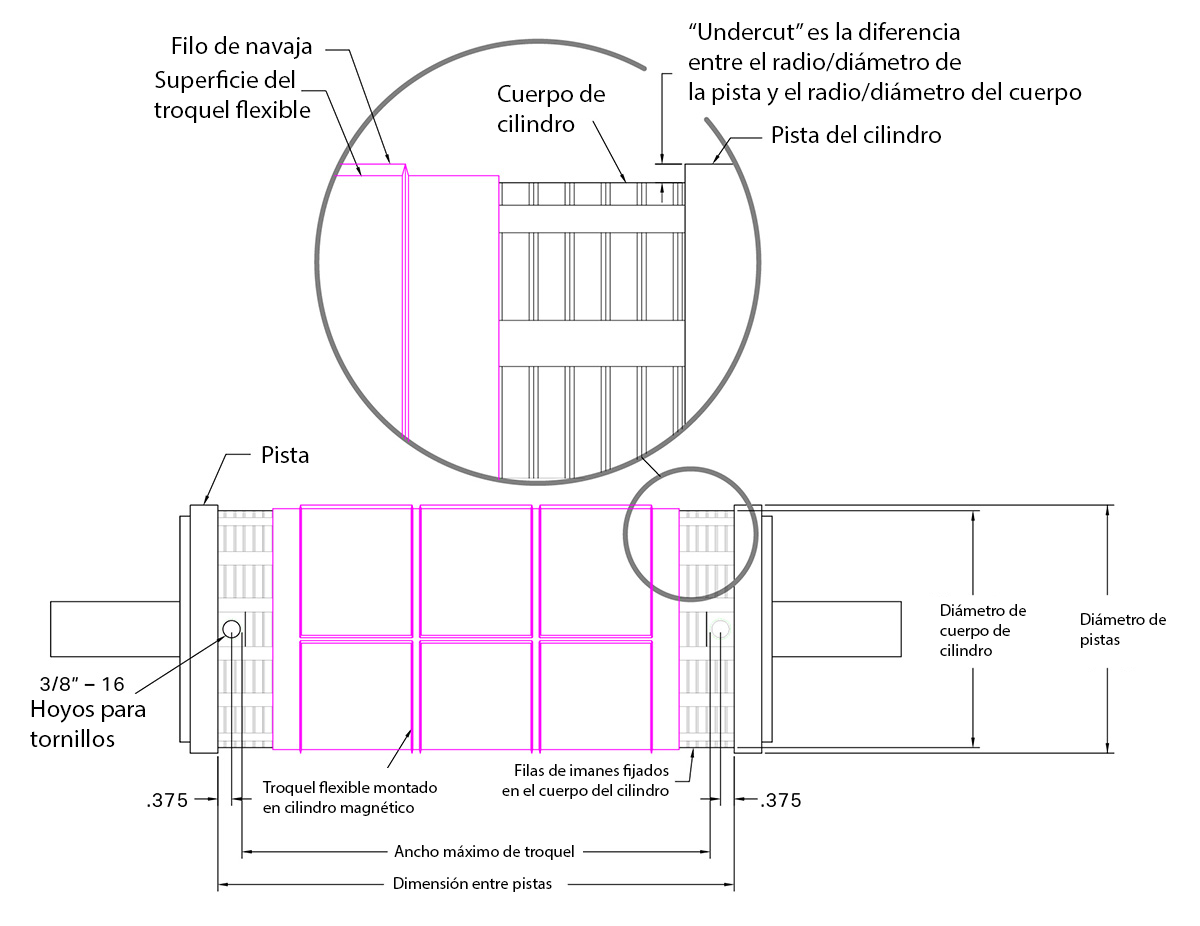
<style>
.page{position:relative;width:1200px;height:926px;background:#ffffff}
.page>*{position:absolute;margin:0}
.t1{font:12px "MyriadPro-Regular";color:#000000}
.t2{font:16.7px "MyriadPro-Regular";color:#000000}
</style>
<div class="page">
<p class="t1" style="left:689px;top:22px;width:393px;height:84px">“Undercut” es la diferencia<br>entre el radio/diámetro de<br>la pista y el radio/diámetro del cuerpo</p>
<p class="t1" style="left:172px;top:36px;width:140px;height:23px">Filo de navaja</p>
<p class="t1" style="left:154px;top:70px;width:157px;height:53px">Superficie del <br>troquel flexible</p>
<p class="t1" style="left:498px;top:84px;width:107px;height:48px">Cuerpo de<br>cilindro</p>
<p class="t1" style="left:772px;top:125px;width:169px;height:18px">Pista del cilindro</p>
<p class="t1" style="left:262px;top:446px;width:47px;height:17px">Pista</p>
<p class="t2" style="left:940px;top:604px;width:86px;height:52px">Diámetro de<br>cuerpo de <br>cilindro</p>
<p class="t2" style="left:1081px;top:613px;width:85px;height:35px">Diámetro de<br>pistas</p>
<p class="t1" style="left:30px;top:700px;width:116px;height:47px">Hoyos para <br>tornillos</p>
<p class="t2" style="left:502px;top:764px;width:167px;height:35px;text-align:right">Filas de imanes fijados<br>en el cuerpo del cilindro</p>
<p class="t2" style="left:262px;top:781px;width:175px;height:35px">Troquel flexible montado<br>en cilindro magnético</p>
<p class="t2" style="left:394px;top:845px;width:180px;height:15px">Ancho máximo de troquel</p>
<p class="t2" style="left:394px;top:877px;width:158px;height:15px">Dimensión entre pistas</p>
</div>
